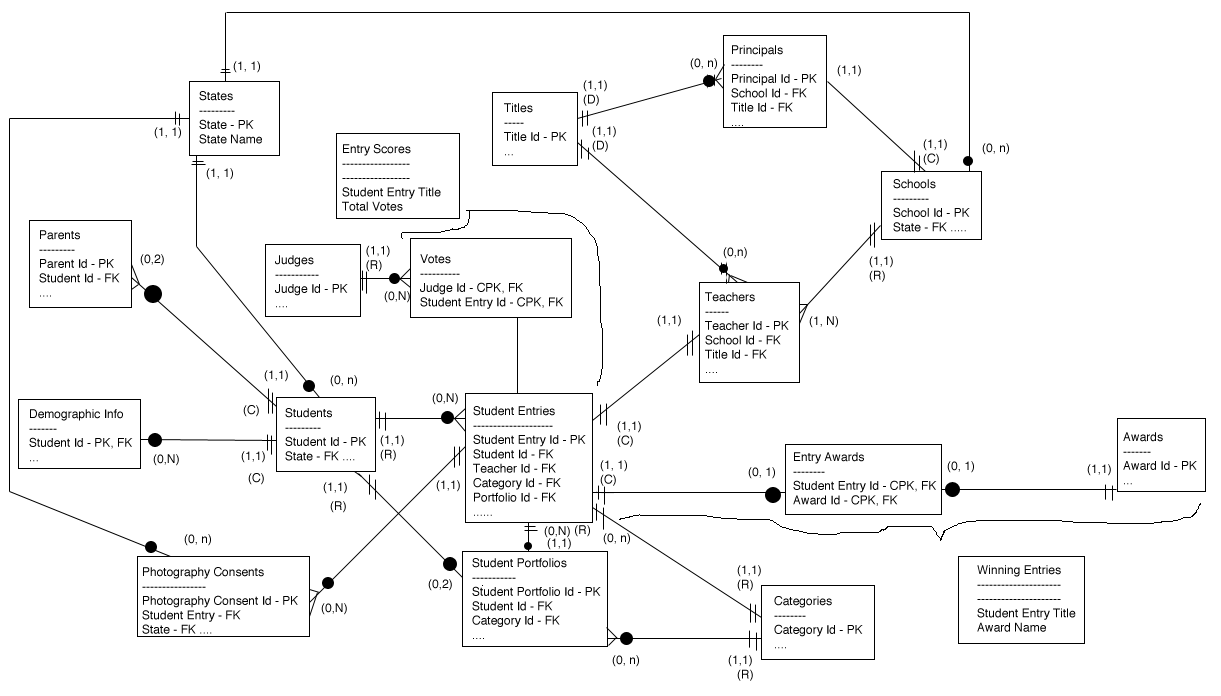
<style>
.page{position:relative;width:1221px;height:696px;background:#ffffff}
.page>*{position:absolute;margin:0}
.t1{font:12px "Helvetica";color:#000000}
.t2{font:12px "Helvetica"}
</style>
<div class="page">
<p class="t1" style="left:731px;top:45px;width:86px;height:81px">Principals<br>--------<br>Principal Id - PK<br>School Id - FK<br>Title Id - FK<br>....</p>
<p class="t1" style="left:233px;top:61px;width:27px;height:12px">(1, 1)</p>
<p class="t1" style="left:690px;top:58px;width:27px;height:12px">(0, n)</p>
<p class="t2" style="left:837px;top:65px;width:24px;height:12px">(1,1)</p>
<p class="t1" style="left:583px;top:80px;width:24px;height:26px">(1,1)<br>(D)</p>
<p class="t1" style="left:199px;top:91px;width:63px;height:53px">States<br>---------<br>State - PK<br>State Name</p>
<p class="t1" style="left:504px;top:103px;width:63px;height:53px">Titles<br>-----<br>Title Id - PK<br>...</p>
<p class="t1" style="left:592px;top:126px;width:24px;height:26px">(1,1)<br>(D)</p>
<p class="t1" style="left:154px;top:127px;width:27px;height:12px">(1, 1)</p>
<p class="t1" style="left:342px;top:144px;width:99px;height:67px">Entry Scores<br>-----------------<br>-----------------<br>Student Entry Title<br>Total Votes</p>
<p class="t1" style="left:923px;top:139px;width:24px;height:26px">(1,1)<br>(C)</p>
<p class="t1" style="left:982px;top:143px;width:27px;height:12px">(0, n)</p>
<p class="t1" style="left:206px;top:168px;width:27px;height:12px">(1, 1)</p>
<p class="t1" style="left:893px;top:179px;width:77px;height:53px">Schools<br>---------<br>School Id - PK<br>State - FK .....</p>
<p class="t1" style="left:39px;top:230px;width:81px;height:67px">Parents<br>---------<br>Parent Id - PK<br>Student Id - FK<br>....</p>
<p class="t1" style="left:366px;top:245px;width:24px;height:27px">(1,1)<br>(R)</p>
<p class="t1" style="left:140px;top:254px;width:24px;height:12px">(0,2)</p>
<p class="t1" style="left:275px;top:255px;width:73px;height:53px">Judges<br>-----------<br>Judge Id - PK<br>....</p>
<p class="t1" style="left:420px;top:254px;width:144px;height:55px">Votes<br>----------<br>Judge Id - CPK, FK<br>Student Entry Id - CPK, FK</p>
<p class="t2" style="left:723px;top:247px;width:24px;height:12px">(0,n)</p>
<p class="t1" style="left:869px;top:256px;width:24px;height:26px">(1,1)<br>(R)</p>
<p class="t2" style="left:384px;top:291px;width:26px;height:12px">(0,N)</p>
<p class="t1" style="left:705px;top:292px;width:84px;height:81px">Teachers<br>------<br>Teacher Id - PK<br>School Id - FK<br>Title Id - FK<br>....</p>
<p class="t2" style="left:657px;top:315px;width:24px;height:12px">(1,1)</p>
<p class="t1" style="left:809px;top:316px;width:29px;height:12px">(1, N)</p>
<p class="t2" style="left:264px;top:370px;width:24px;height:12px">(1,1)</p>
<p class="t1" style="left:330px;top:375px;width:27px;height:12px">(0, n)</p>
<p class="t2" style="left:432px;top:393px;width:26px;height:12px">(0,N)</p>
<p class="t1" style="left:29px;top:409px;width:104px;height:53px">Demographic Info<br>-------<br>Student Id - PK, FK<br>...</p>
<p class="t1" style="left:243px;top:405px;width:16px;height:12px">(C)</p>
<p class="t1" style="left:285px;top:408px;width:82px;height:53px">Students<br>---------<br>Student Id - PK<br>State - FK ....</p>
<p class="t1" style="left:473px;top:406px;width:113px;height:110px">Student Entries<br>--------------------<br>Student Entry Id - PK<br>Student Id - FK<br>Teacher Id - FK<br>Category Id - FK<br>Portfolio Id - FK<br>......</p>
<p class="t1" style="left:617px;top:421px;width:24px;height:26px">(1,1)<br>(C)</p>
<p class="t1" style="left:380px;top:435px;width:24px;height:26px">(1,1)<br>(R)</p>
<p class="t1" style="left:1123px;top:432px;width:74px;height:53px">Awards<br>-------<br>Award Id - PK<br>...</p>
<p class="t2" style="left:153px;top:454px;width:26px;height:12px">(0,N)</p>
<p class="t2" style="left:241px;top:451px;width:24px;height:12px">(1,1)</p>
<p class="t1" style="left:600px;top:460px;width:27px;height:26px">(1, 1)<br>(C)</p>
<p class="t1" style="left:793px;top:452px;width:144px;height:54px">Entry Awards<br>--------<br>Student Entry Id - CPK, FK<br>Award Id - CPK, FK</p>
<p class="t1" style="left:947px;top:461px;width:27px;height:12px">(0, 1)</p>
<p class="t1" style="left:248px;top:473px;width:16px;height:12px">(C)</p>
<p class="t1" style="left:748px;top:467px;width:27px;height:12px">(0, 1)</p>
<p class="t2" style="left:1087px;top:464px;width:24px;height:12px">(1,1)</p>
<p class="t2" style="left:323px;top:482px;width:24px;height:12px">(1,1)</p>
<p class="t2" style="left:436px;top:480px;width:24px;height:12px">(1,1)</p>
<p class="t1" style="left:330px;top:501px;width:16px;height:12px">(R)</p>
<p class="t1" style="left:184px;top:534px;width:27px;height:12px">(0, n)</p>
<p class="t2" style="left:544px;top:526px;width:26px;height:12px">(0,N)</p>
<p class="t1" style="left:575px;top:525px;width:15px;height:12px">(R)</p>
<p class="t1" style="left:603px;top:533px;width:27px;height:12px">(0, n)</p>
<p class="t2" style="left:547px;top:538px;width:24px;height:12px">(1,1)</p>
<p class="t1" style="left:472px;top:558px;width:129px;height:81px">Student Portfolios<br>-----------<br>Student Portfolio Id - PK<br>Student Id - FK<br>Category Id - FK<br>....</p>
<p class="t1" style="left:142px;top:567px;width:156px;height:67px">Photography Consents<br>----------------<br>Photography Consent Id - PK<br>Student Entry - FK<br>State - FK ....</p>
<p class="t1" style="left:737px;top:565px;width:24px;height:26px">(1,1)<br>(R)</p>
<p class="t1" style="left:977px;top:565px;width:99px;height:67px">Winning Entries<br>---------------------<br>---------------------<br>Student Entry Title<br>Award Name</p>
<p class="t1" style="left:428px;top:579px;width:24px;height:12px">(0,2)</p>
<p class="t2" style="left:321px;top:603px;width:26px;height:12px">(0,N)</p>
<p class="t1" style="left:774px;top:596px;width:89px;height:53px">Categories<br>--------<br>Category Id - PK<br>....</p>
<p class="t1" style="left:612px;top:655px;width:27px;height:12px">(0, n)</p>
<p class="t2" style="left:728px;top:655px;width:24px;height:12px">(1,1)</p>
<p class="t1" style="left:737px;top:669px;width:16px;height:12px">(R)</p>
</div>
